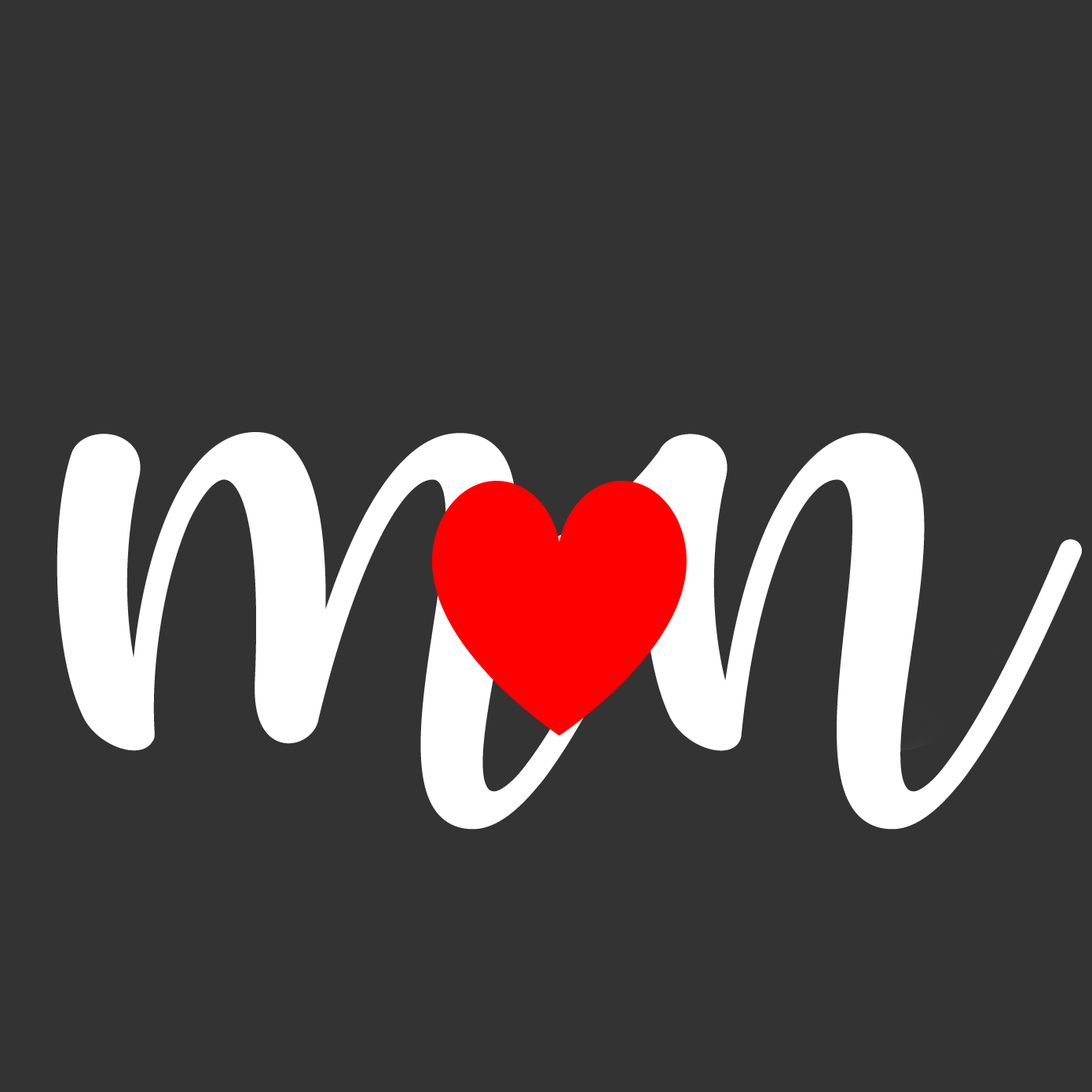
<style>
.page{position:relative;width:1092px;height:1092px;background:#333333}
.page>*{position:absolute;margin:0}
.t1{font:941.3px "HelloRegular";letter-spacing:0.06em;color:#ffffff}
</style>
<div class="page">
<p class="t1" style="left:57px;top:432px;width:605px;height:398px">m</p>
<p class="t1" style="left:643px;top:433px;width:439px;height:397px">n</p>
</div>
